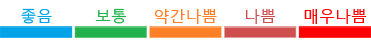
<style>
.page{position:relative;width:371px;height:43px;background:#ffffff}
.page>*{position:absolute;margin:0}
.t1{font:16px "MalgunGothicRegular";color:#00a2e8}
.t2{font:16px "MalgunGothicRegular";color:#22b14c}
.t3{font:16px "MalgunGothicRegular";color:#ff7f27}
.t4{font:16px "MalgunGothicRegular";color:#cf4e4e}
.t5{font:16px "MalgunGothicRegular";color:#ff0000}
</style>
<div class="page">
<p class="t1" style="left:21px;top:8px;width:31px;height:16px">좋음</p>
<p class="t2" style="left:95px;top:8px;width:32px;height:16px">보통</p>
<p class="t3" style="left:155px;top:9px;width:62px;height:15px">약간나쁨</p>
<p class="t4" style="left:246px;top:9px;width:30px;height:15px">나쁨</p>
<p class="t5" style="left:304px;top:9px;width:63px;height:15px">매우나쁨</p>
</div>
